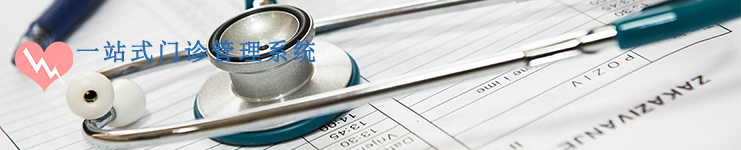
<style>
.page{position:relative;width:741px;height:150px}
.page>*{position:absolute;margin:0}
.t1{font:24px "SimSun";letter-spacing:0.1em;color:#256eb1;font-weight:bold}
</style>
<div class="page">
<p class="t1" style="left:76px;top:39px;width:240px;height:24px">一站式门诊管理系统</p>
</div>
